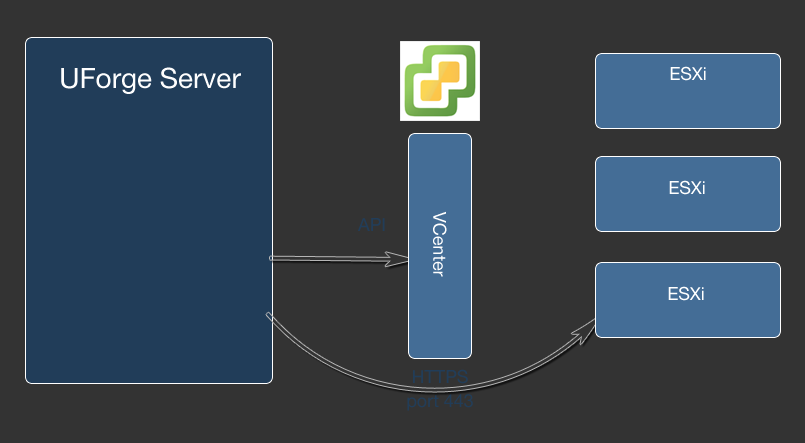
<style>
.page{position:relative;width:805px;height:443px;background:#333333}
.page>*{position:absolute;margin:0}
.t1{font:28px "HelveticaNeue";color:#fefefe}
.t2{font:18px "HelveticaNeue";color:#ffffff}
.t3{font:18px "HelveticaNeue";color:#213d59}
.t4{font:18px/24px "HelveticaNeue";color:#213d59}
</style>
<div class="page">
<p class="t1" style="left:61px;top:67px;width:180px;height:27px">UForge Server</p>
<p class="t2" style="left:670px;top:66px;width:36px;height:15px">ESXi</p>
<p class="t2" style="left:669px;top:180px;width:36px;height:15px">ESXi</p>
<p class="t3" style="left:358px;top:218px;width:27px;height:13px">API</p>
<p class="t2" style="left:433px;top:211px;width:14px;height:66px;rotate:90deg">VCenter</p>
<p class="t2" style="left:668px;top:286px;width:36px;height:15px">ESXi</p>
<p class="t4" style="left:407px;top:369px;width:66px;height:42px;text-align:center">HTTPS<br>port 443</p>
</div>
